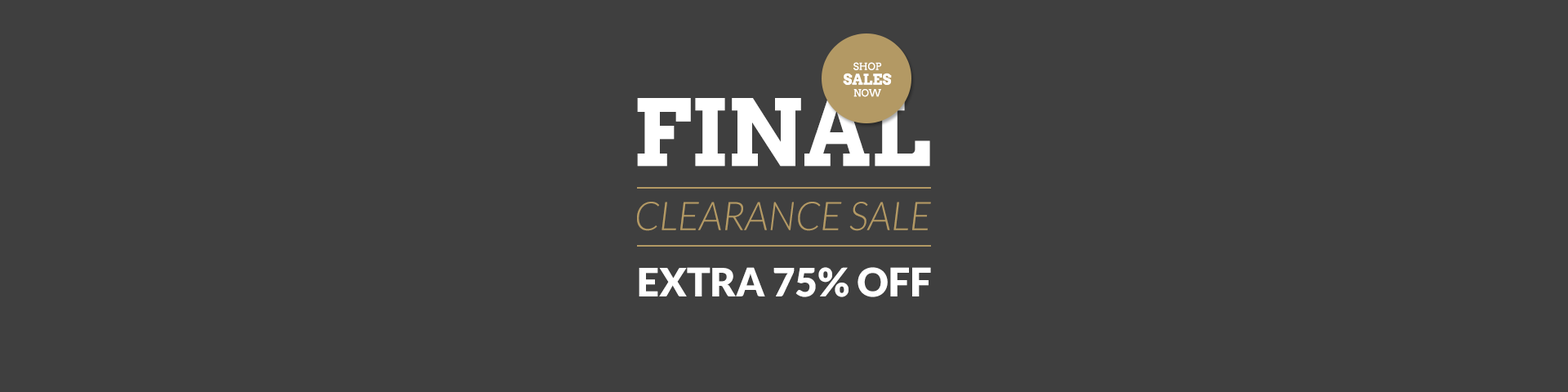
<style>
.page{position:relative;width:1568px;height:392px;background:#3f3f3f}
.page>*{position:absolute;margin:0}
.t1{font:14.7px/14.7px "Arvo-Bold";color:#ffffff;text-transform:uppercase}
.t2{font:9.8px "Arvo";color:#ffffff;text-transform:uppercase}
.t3{font:91.7px "Arvo-Bold";color:#ffffff;text-transform:uppercase}
.t4{font:39.5px "Lato-LightItalic";color:#b39964;text-transform:uppercase}
.t5{font:39.5px "Lato-LightItalic";letter-spacing:-0.1em;color:#b39964;text-transform:uppercase}
.t6{font:39.1px "Lato-Black";color:#ffffff;text-transform:uppercase}
</style>
<div class="page">
<p class="t1" style="left:843px;top:62px;width:49px;height:35px;text-align:center"><span class="t2">shop<br></span>sales<br><span class="t2">now</span></p>
<p class="t3" style="left:637px;top:98px;width:293px;height:69px">FINAL</p>
<p class="t4" style="left:637px;top:202px;width:294px;height:29px"><span class="t5"><br></span>CLEARANCE SALE</p>
<p class="t6" style="left:639px;top:267px;width:292px;height:30px">Extra 75% OFF</p>
</div>
